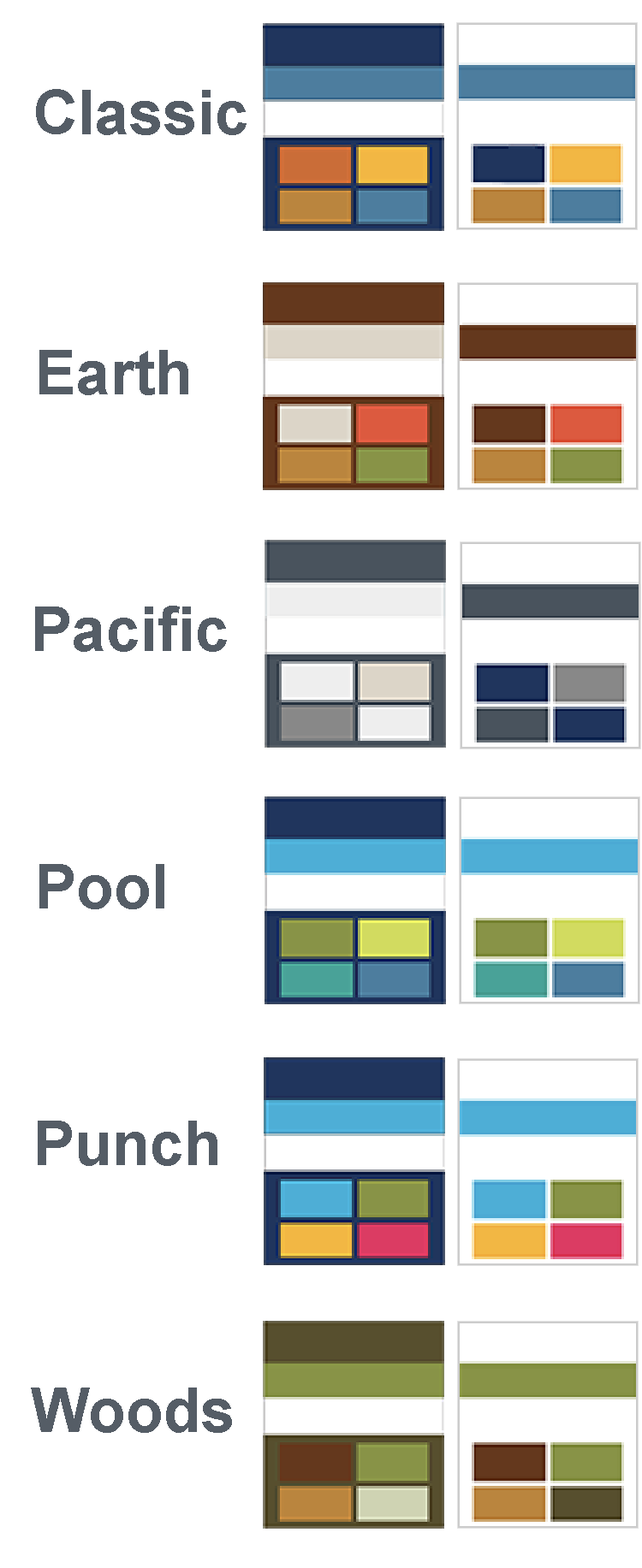
<style>
.page{position:relative;width:642px;height:1568px;background:#ffffff}
.page>*{position:absolute;margin:0}
.t1{font:61.6px "Arial-BoldMT";color:#555d66}
</style>
<div class="page">
<p class="t1" style="left:36px;top:89px;width:210px;height:46px">Classic</p>
<p class="t1" style="left:39px;top:350px;width:149px;height:45px">Earth</p>
<p class="t1" style="left:35px;top:606px;width:192px;height:46px">Pacific</p>
<p class="t1" style="left:39px;top:864px;width:125px;height:45px">Pool</p>
<p class="t1" style="left:38px;top:1121px;width:179px;height:45px">Punch</p>
<p class="t1" style="left:31px;top:1388px;width:201px;height:45px">Woods</p>
</div>
